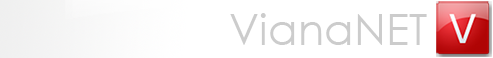
<style>
.page{position:relative;width:493px;height:58px;background:#ffffff}
.page>*{position:absolute;margin:0}
.t1{font:43.2px "CenturyGothic";color:#cccccc}
</style>
<div class="page">
<p class="t1" style="left:230px;top:13px;width:197px;height:32px">VianaNET</p>
</div>
